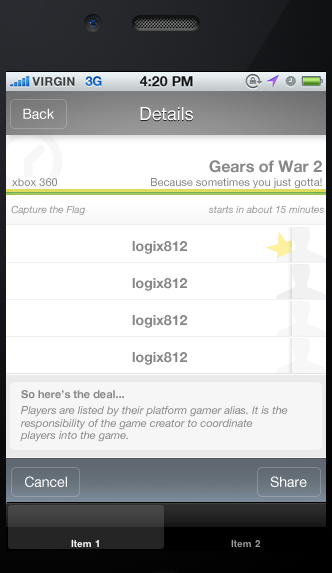
<style>
.page{position:relative;width:332px;height:573px;background:#ffffff}
.page>*{position:absolute;margin:0}
.t1{font:14px "HelveticaNeue";color:#ffffff}
.t2{font:18px "HelveticaNeue";color:#ffffff}
.t3{font:16px "HelveticaNeue-Bold";color:#888888}
.t4{font:11px "HelveticaNeue";color:#888888}
.t5{font:10px "HelveticaNeue-Italic";color:#888888}
.t6{font:10px "HelveticaNeue-Italic"}
.t7{font:14px "HelveticaNeue-Bold";color:#888888}
.t8{font:11px "HelveticaNeue-Bold";color:#888888}
.t9{font:11px "HelveticaNeue-Italic";color:#888888}
</style>
<div class="page">
<p class="t1" style="left:23px;top:108px;width:31px;height:11px">Back</p>
<p class="t2" style="left:140px;top:107px;width:53px;height:14px">Details</p>
<p class="t3" style="left:209px;top:160px;width:113px;height:13px">Gears of War 2</p>
<p class="t4" style="left:12px;top:178px;width:45px;height:8px">xbox 360</p>
<p class="t4" style="left:151px;top:178px;width:171px;height:11px">Because sometimes you just gotta!</p>
<p class="t5" style="left:11px;top:205px;width:74px;height:10px">Capture the Flag</p>
<p class="t6" style="left:209px;top:205px;width:115px;height:8px">starts in about 15 minutes</p>
<p class="t7" style="left:132px;top:241px;width:55px;height:13px">logix812</p>
<p class="t7" style="left:132px;top:278px;width:55px;height:13px">logix812</p>
<p class="t7" style="left:132px;top:315px;width:55px;height:13px">logix812</p>
<p class="t7" style="left:132px;top:352px;width:55px;height:13px">logix812</p>
<p class="t8" style="left:21px;top:390px;width:103px;height:9px">So here’s the deal...</p>
<p class="t9" style="left:21px;top:406px;width:267px;height:11px">Players are listed by their platform gamer alias. It is the</p>
<p class="t9" style="left:21px;top:419px;width:232px;height:11px">responsibility of the game creator to coordinate</p>
<p class="t9" style="left:20px;top:431px;width:108px;height:11px">players into the game.</p>
<p class="t1" style="left:25px;top:476px;width:42px;height:11px">Cancel</p>
<p class="t1" style="left:270px;top:476px;width:37px;height:11px">Share</p>
</div>
